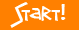
<style>
.page{position:relative;width:79px;height:30px;background:#ff8000}
.page>*{position:absolute;margin:0}
.t1{font:30px "Screwball";color:#ffffff}
</style>
<div class="page">
<p class="t1" style="left:10px;top:2px;width:56px;height:26px">Start!</p>
</div>
